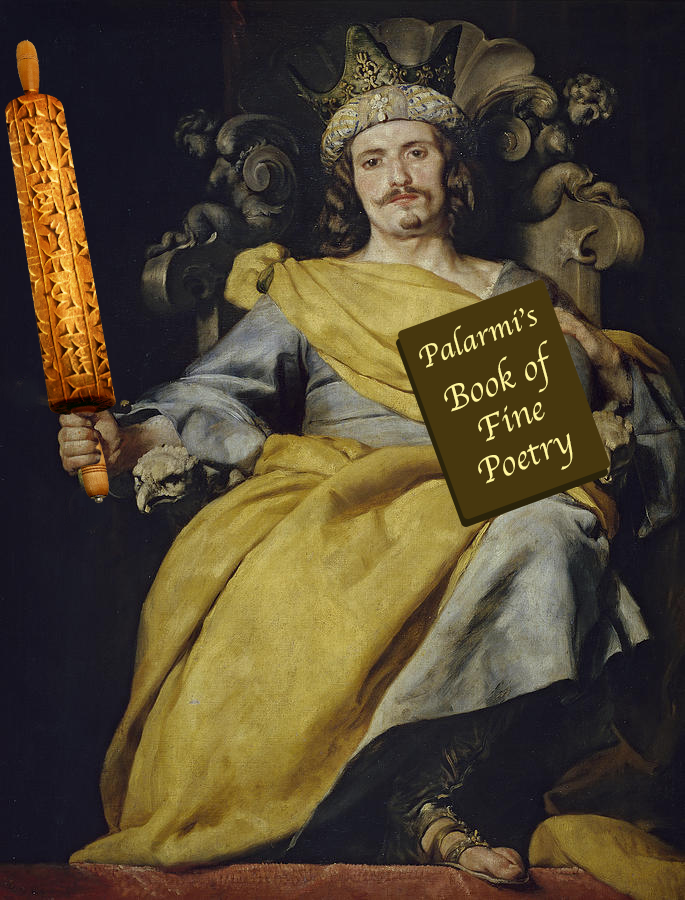
<style>
.page{position:relative;width:685px;height:900px}
.page>*{position:absolute;margin:0}
.t1{font:36px/40px "Apple-Chancery";color:#fff59d}
.t2{font:31px/40px "Apple-Chancery";color:#fff59d}
</style>
<div class="page">
<p class="t1" style="left:419px;top:308px;width:154px;height:176px;text-align:center;rotate:-21deg"><span class="t2">Palarmi’s<br></span>Book of<br>Fine<br>Poetry</p>
</div>
